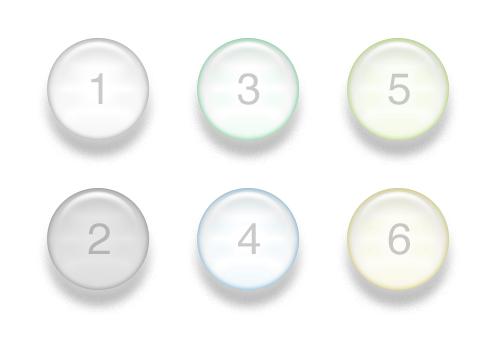
<style>
.page{position:relative;width:494px;height:340px;background:#ffffff}
.page>*{position:absolute;margin:0}
.t1{font:44px "Helvetica";letter-spacing:-0.05em;color:#cacaca}
.t2{font:44px "Helvetica";letter-spacing:-0.05em;color:#c7c9c3}
.t3{font:44px "Helvetica";letter-spacing:-0.05em;color:#b6b6b6}
.t4{font:44px "Helvetica";letter-spacing:-0.05em;color:#c9c8c3}
</style>
<div class="page">
<p class="t1" style="left:91px;top:73px;width:12px;height:31px">1</p>
<p class="t1" style="left:238px;top:73px;width:22px;height:32px">3</p>
<p class="t2" style="left:388px;top:73px;width:22px;height:32px">5</p>
<p class="t3" style="left:88px;top:223px;width:22px;height:31px">2</p>
<p class="t1" style="left:238px;top:223px;width:22px;height:31px">4</p>
<p class="t4" style="left:388px;top:223px;width:22px;height:32px">6</p>
</div>
